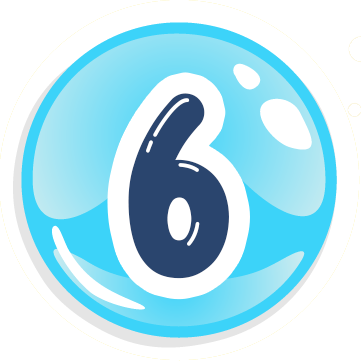
<style>
.page{position:relative;width:361px;height:364px;background:#ffffff}
.page>*{position:absolute;margin:0}
.t1{font:262.5px "BubbleBobble";color:#2a456e}
</style>
<div class="page">
<p class="t1" style="left:128px;top:93px;width:101px;height:186px">6</p>
</div>
